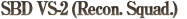
<style>
.page{position:relative;width:187px;height:19px;background:#ffffff}
.page>*{position:absolute;margin:0}
.t1{font:18px "RyuminPro-ExBold";letter-spacing:-0.08em;color:#4a3f32;font-weight:bold;scale:0.9 1}
</style>
<div class="page">
<p class="t1" style="left:1px;top:1px;width:177px;height:18px">SBD VS-2 (Recon. Squad.)</p>
</div>
